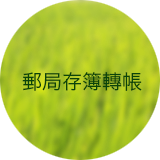
<style>
.page{position:relative;width:160px;height:160px;background:#ffffff}
.page>*{position:absolute;margin:0}
.t1{font:20px "HiraginoSansGB-W3";color:#0b440a}
</style>
<div class="page">
<p class="t1" style="left:22px;top:72px;width:120px;height:19px">郵局存簿轉帳</p>
</div>
